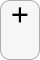
<style>
.page{position:relative;width:40px;height:60px;background:#f6f6f6}
.page>*{position:absolute;margin:0}
.t1{font:28px "GrotesqueMTStd";color:#000000}
</style>
<div class="page">
<p class="t1" style="left:12px;top:7px;width:16px;height:16px">+</p>
</div>
